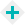
<style>
.page{position:relative;width:25px;height:25px;background:#ffffff}
.page>*{position:absolute;margin:0}
.t1{font:29.3px "Impact";color:#00b5b5}
</style>
<div class="page">
<p class="t1" style="left:6px;top:6px;width:13px;height:13px">+</p>
</div>
